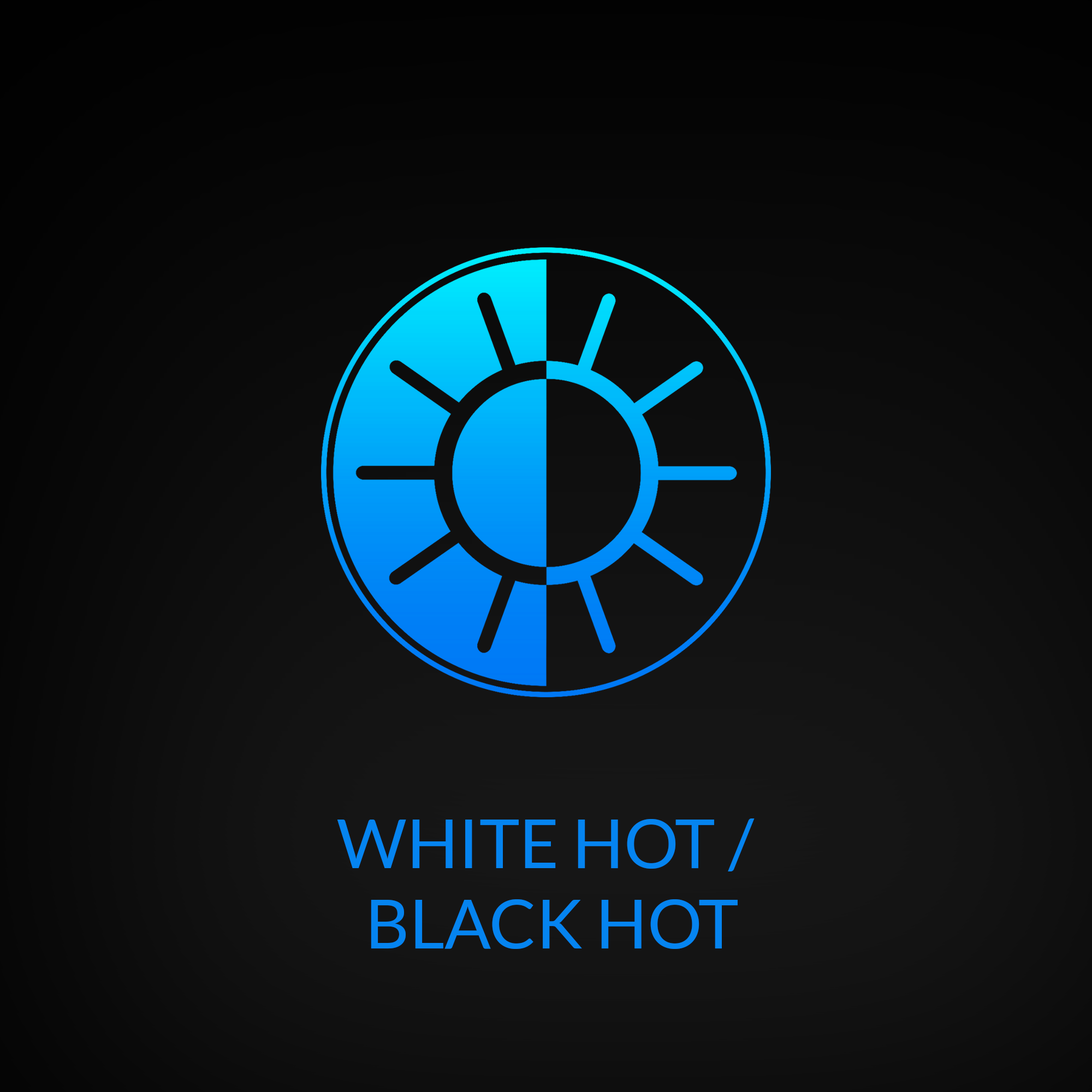
<style>
.page{position:relative;width:1092px;height:1092px}
.page>*{position:absolute;margin:0}
.t1{font:68.2px/80.2px "Lato-Regular";color:#0584f0}
</style>
<div class="page">
<p class="t1" style="left:337px;top:818px;width:418px;height:131px;text-align:center">WHITE HOT / <br>BLACK HOT</p>
</div>
